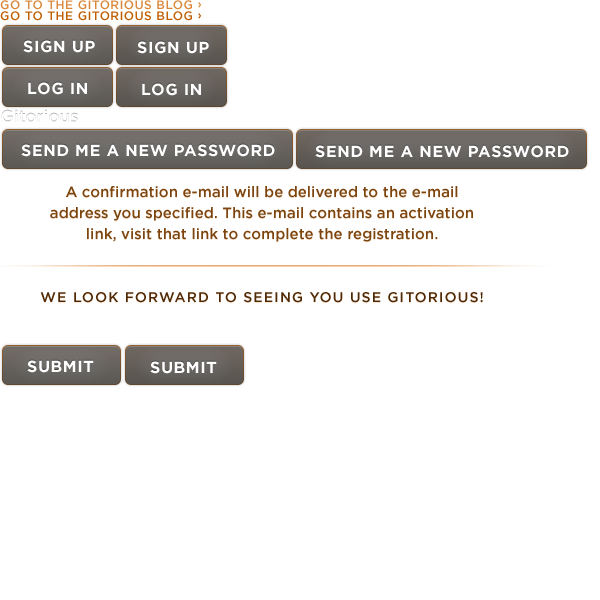
<style>
.page{position:relative;width:600px;height:600px;background:#ffffff}
.page>*{position:absolute;margin:0}
.t1{font:12px "GothamHTF-Medium";letter-spacing:0.04em;color:#d98839}
.t2{font:12px "GothamHTF-Medium";letter-spacing:0.04em;color:#bf5e00}
.t3{font:16px "GothamHTF-Bold";letter-spacing:0.04em;color:#ffffff}
.t4{font:15px/21px "GothamHTF-Medium";color:#7c440e}
.t5{font:14px/42px "GothamHTF-Medium";letter-spacing:0.08em;color:#4f2905;text-transform:uppercase}
</style>
<div class="page">
<p class="t1" style="left:0px;top:0px;width:202px;height:10px">GO TO THE GITORIOUS BLOG ›</p>
<p class="t2" style="left:0px;top:11px;width:202px;height:10px">GO TO THE GITORIOUS BLOG ›</p>
<p class="t3" style="left:23px;top:40px;width:72px;height:13px">SIGN UP</p>
<p class="t3" style="left:137px;top:41px;width:72px;height:13px">SIGN UP</p>
<p class="t3" style="left:28px;top:82px;width:59px;height:13px">LOG IN</p>
<p class="t3" style="left:142px;top:83px;width:59px;height:13px">LOG IN</p>
<p class="t3" style="left:21px;top:144px;width:254px;height:13px">SEND ME A NEW PASSWORD</p>
<p class="t3" style="left:315px;top:145px;width:254px;height:13px">SEND ME A NEW PASSWORD</p>
<p class="t4" style="left:40px;top:186px;width:443px;height:117px;text-align:center">A confirmation e-mail will be delivered to the e-mail <br>address you specified. This e-mail contains an activation <br>link, visit that link to complete the registration.<br><br><span class="t5">We look forward to seeing you use Gitorious!</span></p>
<p class="t3" style="left:27px;top:360px;width:67px;height:13px">SUBMIT</p>
<p class="t3" style="left:150px;top:361px;width:67px;height:13px">SUBMIT</p>
</div>
